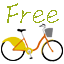
<style>
.page{position:relative;width:64px;height:64px;background:#ffffff}
.page>*{position:absolute;margin:0}
.t1{font:27px "DFChu-W4-WIN-BF";color:#99ae19}
</style>
<div class="page">
<p class="t1" style="left:7px;top:3px;width:52px;height:20px">Free</p>
</div>
